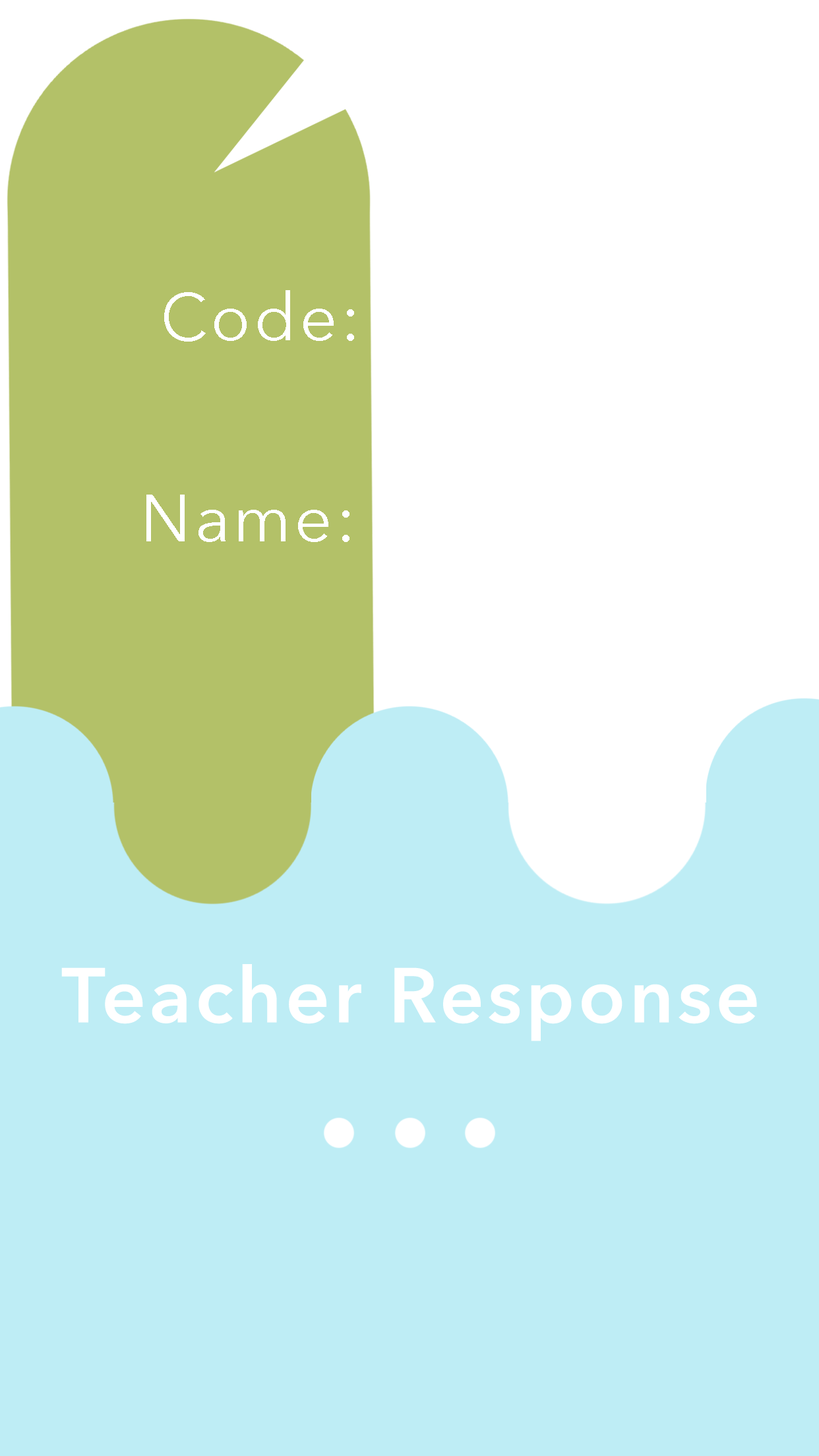
<style>
.page{position:relative;width:819px;height:1456px;background:#beedf5}
.page>*{position:absolute;margin:0}
.t1{font:65.9px "AvenirNext-Regular";letter-spacing:0.05em;color:#ffffff}
.t2{font:76.9px "AvenirNext-DemiBold";letter-spacing:0.05em;color:#ffffff}
</style>
<div class="page">
<p class="t1" style="left:164px;top:290px;width:190px;height:52px">Code:</p>
<p class="t1" style="left:146px;top:495px;width:203px;height:47px">Name:</p>
<p class="t2" style="left:61px;top:964px;width:696px;height:77px">Teacher Response</p>
</div>
